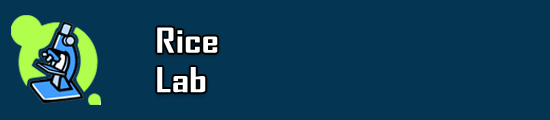
<style>
.page{position:relative;width:550px;height:120px;background:#043654}
.page>*{position:absolute;margin:0}
.t1{font:32.9px "AgencyFB-Bold";color:#ffffff;scale:1.33 1}
</style>
<div class="page">
<p class="t1" style="left:157px;top:27px;width:61px;height:66px">Rice <br>Lab</p>
</div>
